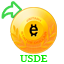
<style>
.page{position:relative;width:64px;height:64px;background:#ffffff}
.page>*{position:absolute;margin:0}
.t1{font:10px "Georgia";color:#0ee504}
</style>
<div class="page">
<p class="t1" style="left:20px;top:55px;width:28px;height:7px">USDE</p>
</div>
